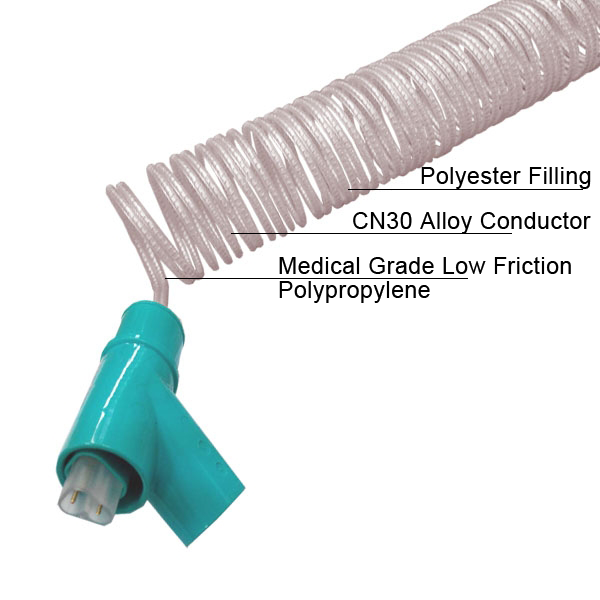
<style>
.page{position:relative;width:600px;height:600px;background:#ffffff}
.page>*{position:absolute;margin:0}
.t1{font:23px "ArialMT";letter-spacing:0.025em;color:#000000}
.t2{font:23px/12px "ArialMT";letter-spacing:0.025em;color:#000000}
</style>
<div class="page">
<p class="t1" style="left:421px;top:167px;width:170px;height:22px">Polyester Filling</p>
<p class="t1" style="left:353px;top:212px;width:238px;height:22px">CN30 Alloy Conductor</p>
<p class="t2" style="left:279px;top:257px;width:292px;height:46px">Medical Grade Low Friction<br><br>Polypropylene</p>
</div>
